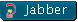
<style>
.page{position:relative;width:78px;height:22px;background:#045975}
.page>*{position:absolute;margin:0}
.t1{font:13px "LucidaSansUnicode";letter-spacing:0.05em;color:#ffffff}
</style>
<div class="page">
<p class="t1" style="left:24px;top:4px;width:43px;height:12px">Jabber</p>
</div>
